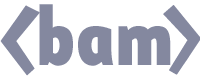
<style>
.page{position:relative;width:200px;height:82px;background:#ffffff}
.page>*{position:absolute;margin:0}
.t1{font:150px "CrashLandingBB";color:#84889f}
.t2{font:91.7px "GravesideBB";color:#84889f;scale:0.74 1}
</style>
<div class="page">
<p class="t1" style="left:0px;top:5px;width:40px;height:71px">&lt;</p>
<p class="t2" style="left:39px;top:4px;width:132px;height:62px">bam</p>
<p class="t1" style="left:163px;top:5px;width:38px;height:70px">&gt;</p>
</div>
